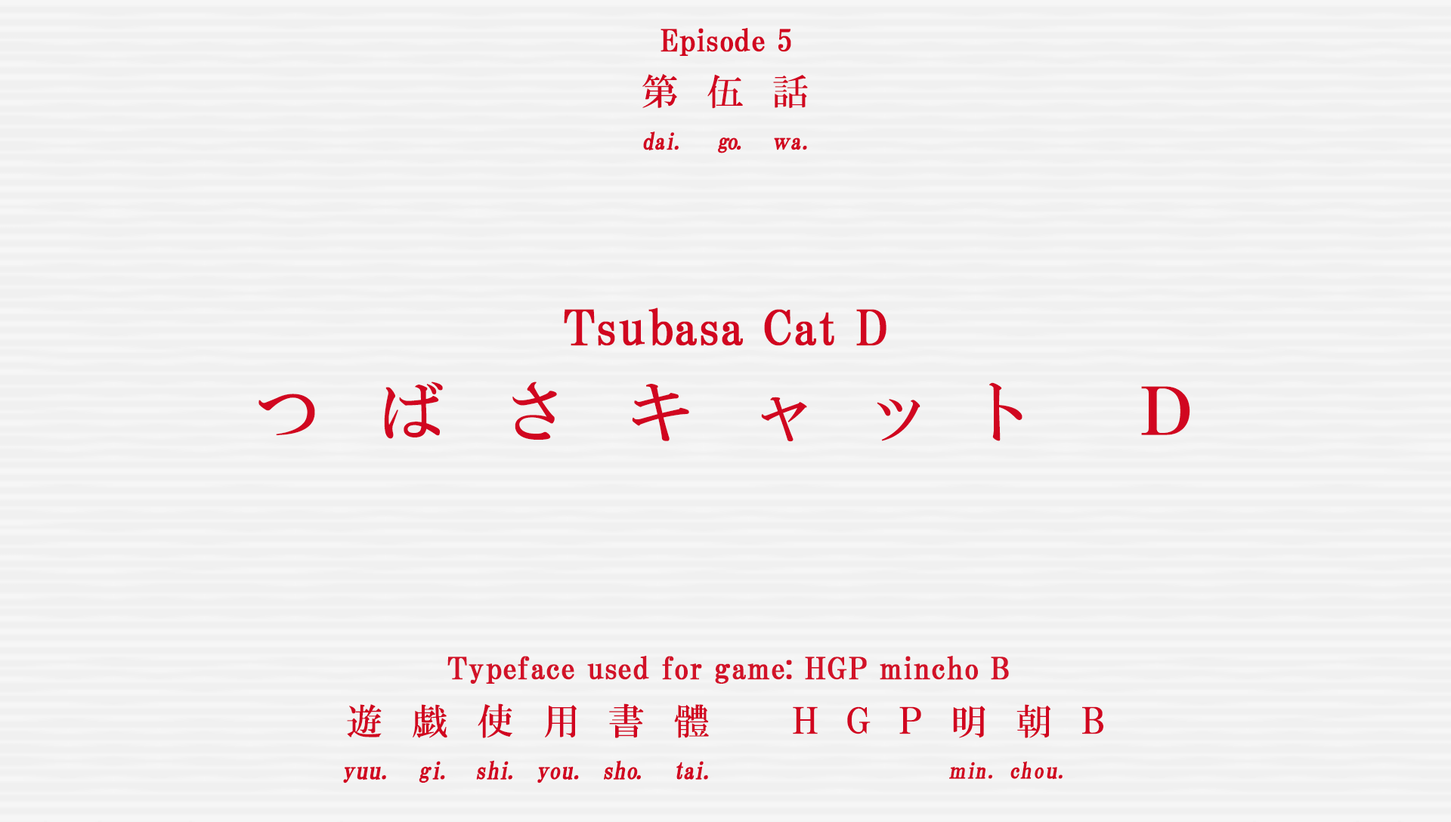
<style>
.page{position:relative;width:1451px;height:822px;background:#f0f0f0}
.page>*{position:absolute;margin:0}
.t1{font:30.2px "HGPMinchoB";letter-spacing:0.01em;color:#d10620;font-weight:bold}
.t2{font:36.5px "HGMinchoB";letter-spacing:0.79em;color:#d10620}
.t3{font:23.2px "HGMinchoB";letter-spacing:-0.1em;color:#d10620;font-weight:bold;scale:0.96 1}
.t4{font:23.2px "HGMinchoB";color:#d10620;font-weight:bold;scale:0.96 1}
.t5{font:23.2px "HGMinchoB";letter-spacing:-0.075em;color:#d10620;font-weight:bold;scale:0.96 1}
.t6{font:23.2px "HGMinchoB";letter-spacing:0.07em;color:#d10620;font-weight:bold;scale:0.96 1}
.t7{font:23.2px "HGMinchoB";letter-spacing:-0.05em;color:#d10620;font-weight:bold;scale:0.86 1}
.t8{font:48.4px "HGPMinchoB";letter-spacing:0.01em;color:#d10620;font-weight:bold}
.t9{font:65.7px "HGMinchoB";letter-spacing:0.89em;color:#d10620}
.t10{font:65.7px "HGMinchoB";letter-spacing:0.75em;color:#d10620}
.t11{font:65.7px "HGMinchoB";letter-spacing:0.55em;color:#d10620}
.t12{font:65.7px "HGMinchoB";letter-spacing:0.47em;color:#d10620}
.t13{font:30.2px "HGPMinchoB";letter-spacing:0.01em;color:#d21228;font-weight:bold}
.t14{font:36.3px "HGMinchoB";letter-spacing:0.81em;color:#d10620}
.t15{font:36.3px "HGMinchoB";letter-spacing:0.8em;color:#d10620}
.t16{font:36.3px "HGMinchoB";letter-spacing:0.79em;color:#d10620}
.t17{font:36.3px "HGMinchoB";letter-spacing:0.71em;color:#d10620;scale:0.85 1}
.t18{font:36.3px "HGMinchoB";letter-spacing:0.53em;color:#d10620}
.t19{font:24.2px "HGMinchoB";color:#d10620;font-weight:bold}
.t20{font:24.2px "HGMinchoB";letter-spacing:0.025em;color:#d10620;font-weight:bold;scale:0.96 1}
.t21{font:24.2px "HGMinchoB";letter-spacing:0.075em;color:#d10620;font-weight:bold;scale:0.96 1}
.t22{font:24.2px "HGMinchoB";letter-spacing:-0.025em;color:#d10620;font-weight:bold;scale:0.96 1}
.t23{font:24.2px "HGMinchoB";letter-spacing:-0.11em;color:#d10620;font-weight:bold;scale:0.96 1}
.t24{font:24.2px "HGMinchoB";color:#d10620;font-weight:bold;scale:0.96 1}
.t25{font:24.2px "HGMinchoB";letter-spacing:-0.05em;color:#d10620;font-weight:bold;scale:0.96 1}
.t26{font:24.2px "HGMinchoB";letter-spacing:-0.12em;color:#d10620;font-weight:bold;scale:0.96 1}
.t27{font:24.2px "HGMinchoB";letter-spacing:-0.01em;color:#d10620;font-weight:bold;scale:0.96 1}
.t28{font:24.2px "HGMinchoB";letter-spacing:0.005em;color:#d10620;font-weight:bold;scale:0.96 1}
.t29{font:24.2px "HGMinchoB";letter-spacing:-0.09em;color:#d10620;font-weight:bold;scale:0.96 1}
.t30{font:24.2px "HGMinchoB";letter-spacing:-0.075em;color:#d10620;font-weight:bold;scale:0.96 1}
.t31{font:24.2px "HGMinchoB";letter-spacing:-0.1em;color:#d10620;font-weight:bold;scale:0.96 1}
.t32{font:22px "HGMinchoB";letter-spacing:0.07em;color:#d10620;font-weight:bold;scale:0.96 1}
.t33{font:22px "HGMinchoB";letter-spacing:-0.075em;color:#d10620;font-weight:bold;scale:0.83 1}
.t34{font:22px "HGMinchoB";letter-spacing:-0.075em;color:#d10620;font-weight:bold;scale:0.96 1}
.t35{font:22px "HGMinchoB";color:#d10620;font-weight:bold;scale:0.96 1}
.t36{font:22px "HGMinchoB";letter-spacing:0.05em;color:#d10620;font-weight:bold;scale:0.96 1}
.t37{font:22px "HGMinchoB";letter-spacing:0.01em;color:#d10620;font-weight:bold;scale:1.06 1}
</style>
<div class="page">
<p class="t1" style="left:660px;top:28px;width:131px;height:28px">Episode 5</p>
<p class="t2" style="left:642px;top:74px;width:166px;height:35px">第伍話</p>
<p class="t3" style="left:643px;top:131px;width:164px;height:22px"><span class="t4">d</span><span class="t5">a</span>i<span class="t6">.  </span>go<span class="t6">.  </span><span class="t7">ｗ</span><span class="t4">a</span><span class="t6">.</span></p>
<p class="t8" style="left:564px;top:308px;width:322px;height:38px">Tsubasa Cat D</p>
<p class="t9" style="left:258px;top:382px;width:932px;height:60px">つばさキ<span class="t10">ャ</span><span class="t11">ット</span><span class="t12"> Ｄ</span></p>
<p class="t13" style="left:447px;top:656px;width:562px;height:28px">Typeface used for game: HGP mincho B</p>
<p class="t14" style="left:347px;top:703px;width:362px;height:35px">遊<span class="t15">戯</span>使<span class="t16">用</span>書體</p>
<p class="t17" style="left:793px;top:706px;width:310px;height:28px">ＨＧＰ    Ｂ</p>
<p class="t16" style="left:953px;top:704px;width:97px;height:34px">明<span class="t18">朝</span></p>
<p class="t19" style="left:343px;top:760px;width:365px;height:23px"><span class="t20">y</span>uu<span class="t21">. </span><span class="t22">g</span><span class="t23">i</span><span class="t21">. </span><span class="t24">s</span><span class="t25">h</span><span class="t26">i</span><span class="t21">. </span><span class="t27">y</span><span class="t28">ou</span><span class="t21">. </span><span class="t22">s</span><span class="t24">h</span><span class="t29">o</span><span class="t21">.  </span><span class="t30">t</span><span class="t31">ai</span><span class="t21">.</span></p>
<p class="t32" style="left:949px;top:761px;width:113px;height:19px"><span class="t33">ｍ</span><span class="t34">i</span>n. <span class="t35">c</span>h<span class="t36">o</span><span class="t37">u</span>.</p>
</div>
